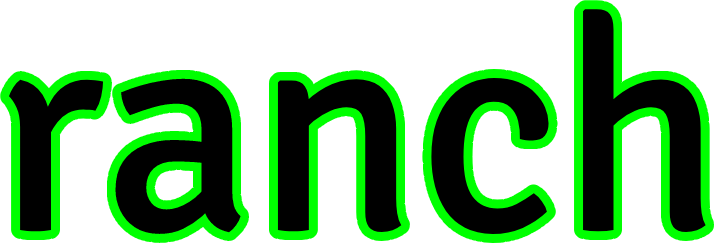
<style>
.page{position:relative;width:714px;height:243px;background:#ffffff}
.page>*{position:absolute;margin:0}
.t1{font:300px "Signika-Regular";color:#000000}
</style>
<div class="page">
<p class="t1" style="left:9px;top:9px;width:697px;height:225px">ranch</p>
</div>
